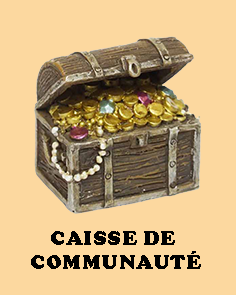
<style>
.page{position:relative;width:236px;height:295px;background:#fcd89f}
.page>*{position:absolute;margin:0}
.t1{font:20.8px "CooperBlack";letter-spacing:0.025em;color:#000000}
</style>
<div class="page">
<p class="t1" style="left:31px;top:231px;width:170px;height:38px;text-align:center">CAISSE DE <br>COMMUNAUTÉ</p>
</div>
